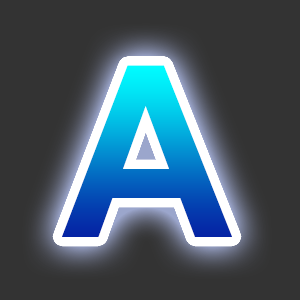
<style>
.page{position:relative;width:300px;height:300px;background:#333333}
.page>*{position:absolute;margin:0}
.t1{font:239.5px "Arial-BoldMT"}
</style>
<div class="page">
<p class="t1" style="left:62px;top:65px;width:170px;height:172px">A</p>
</div>
